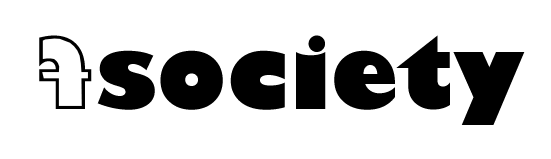
<style>
.page{position:relative;width:551px;height:159px;background:#ffffff}
.page>*{position:absolute;margin:0}
.t1{font:97px "GillSans-UltraBold";color:#000000}
</style>
<div class="page">
<p class="t1" style="left:97px;top:35px;width:428px;height:90px">society</p>
</div>
